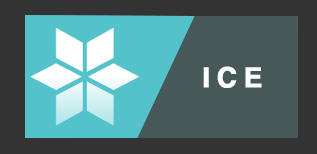
<style>
.page{position:relative;width:317px;height:154px;background:#333333}
.page>*{position:absolute;margin:0}
.t1{font:27.7px "UTMHelveBold";letter-spacing:0.2em;color:#ffffff;font-weight:bold}
</style>
<div class="page">
<p class="t1" style="left:203px;top:66px;width:59px;height:22px">ICE</p>
</div>
